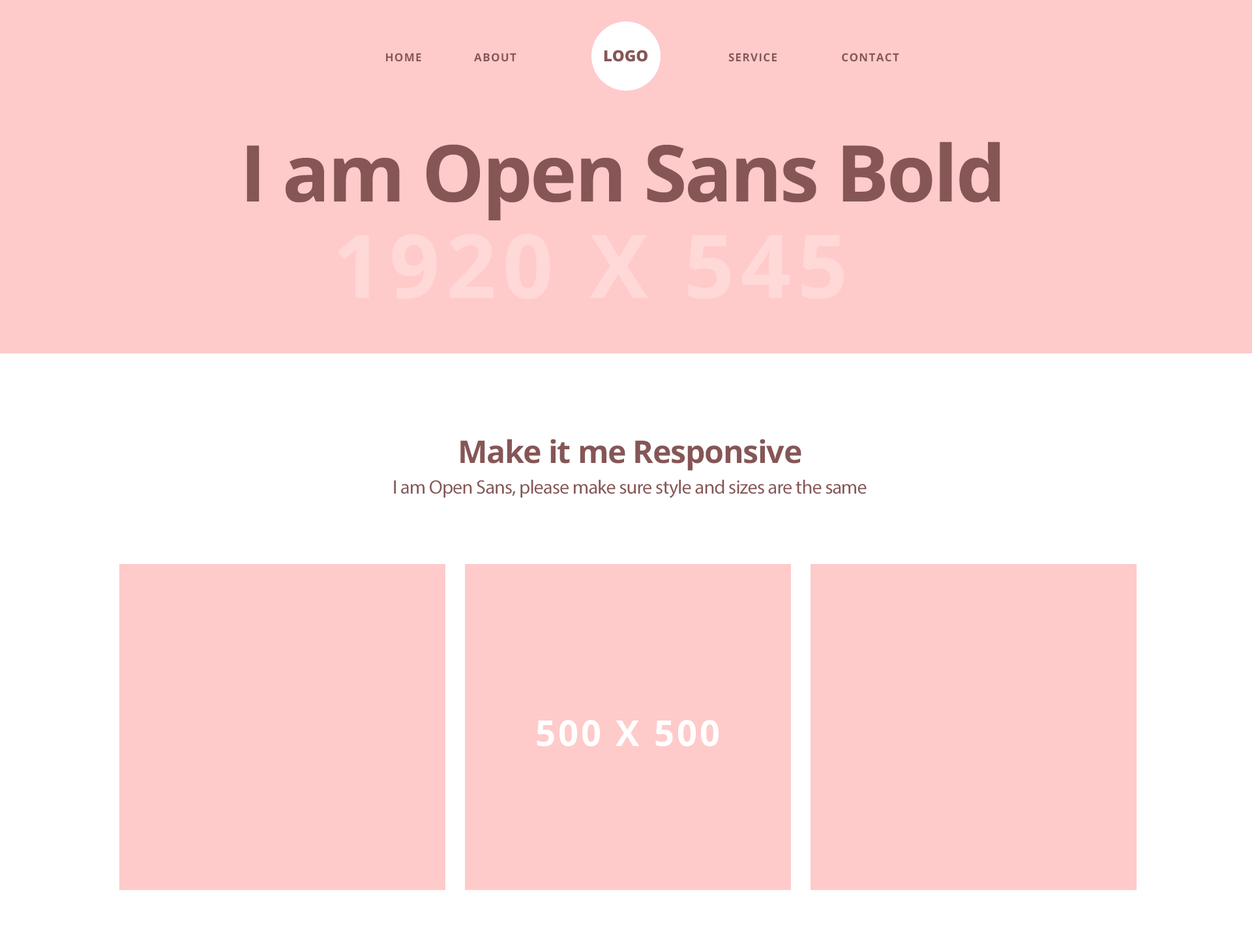
<style>
.page{position:relative;width:1252px;height:952px;background:#ffcaca}
.page>*{position:absolute;margin:0}
.t1{font:11.1px "OpenSans-Bold";letter-spacing:0.075em;color:#865656;text-transform:uppercase}
.t2{font:15.3px "OpenSans-Extrabold";color:#865656;text-transform:uppercase}
.t3{font:78.5px "OpenSans-Bold";letter-spacing:-0.025em;color:#865656}
.t4{font:88.2px "OpenSans-Bold";letter-spacing:0.075em;color:#ffd8d8;text-transform:uppercase}
.t5{font:31.3px "OpenSans-Bold";letter-spacing:-0.025em;color:#865656}
.t6{font:19.6px "MyriadPro-Regular";letter-spacing:-0.025em;color:#865656}
.t7{font:35.7px "OpenSans-Bold";letter-spacing:0.075em;color:#ffffff;text-transform:uppercase}
</style>
<div class="page">
<p class="t1" style="left:386px;top:53px;width:35px;height:9px">Home</p>
<p class="t1" style="left:474px;top:53px;width:43px;height:9px">about</p>
<p class="t2" style="left:604px;top:50px;width:44px;height:12px">Logo</p>
<p class="t1" style="left:729px;top:53px;width:48px;height:9px">service</p>
<p class="t1" style="left:842px;top:53px;width:57px;height:9px">contact</p>
<p class="t3" style="left:247px;top:142px;width:753px;height:78px">I am Open Sans Bold</p>
<p class="t4" style="left:337px;top:234px;width:507px;height:65px">1920 x 545</p>
<p class="t5" style="left:460px;top:439px;width:342px;height:32px">Make it me Responsive</p>
<p class="t6" style="left:394px;top:479px;width:473px;height:19px">I am Open Sans, please make sure style and sizes are the same</p>
<p class="t7" style="left:537px;top:720px;width:182px;height:27px">500 x 500</p>
</div>
